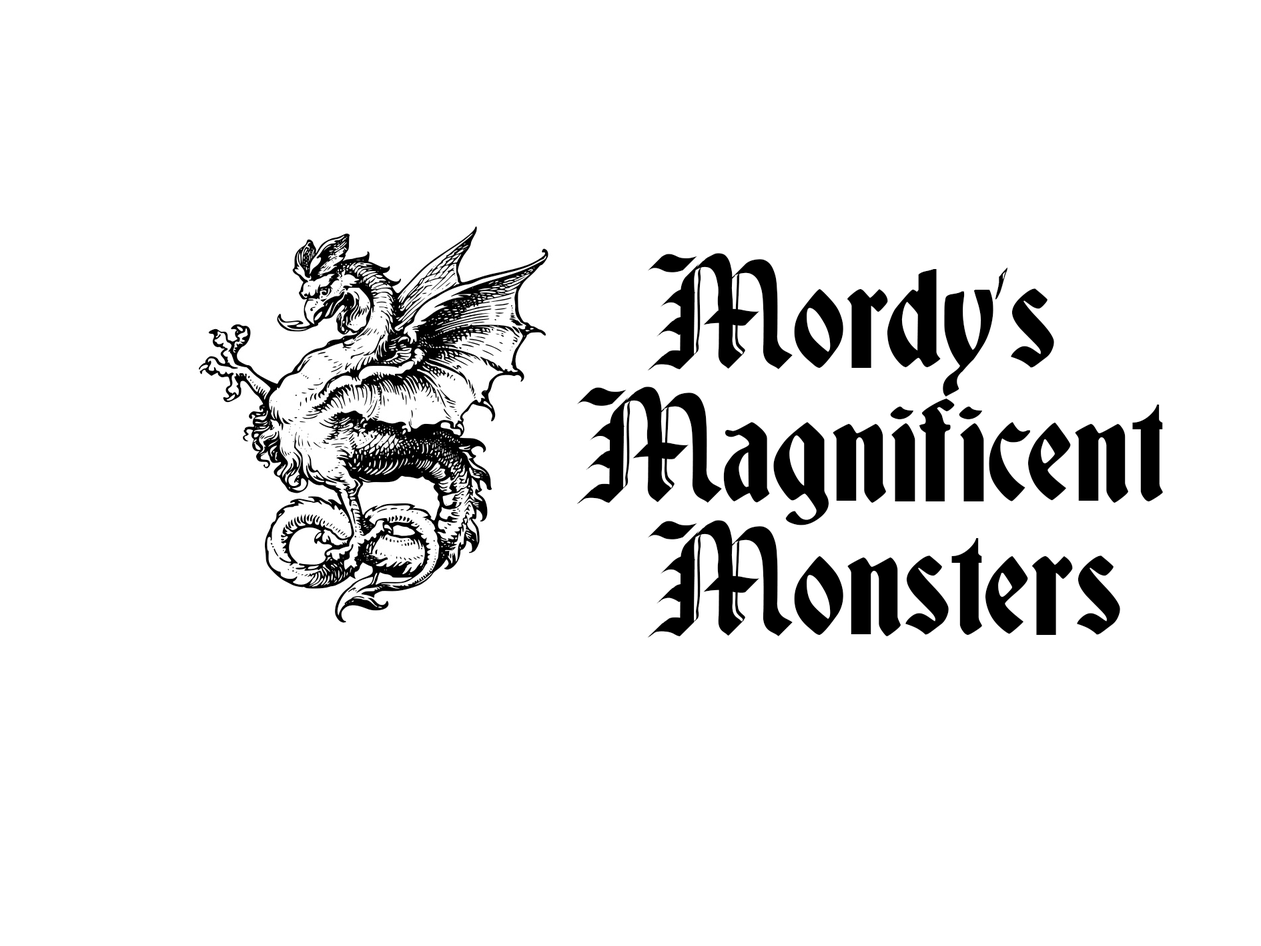
<style>
.page{position:relative;width:1261px;height:946px;background:#ffffff}
.page>*{position:absolute;margin:0}
.t1{font:133.5px/133.5px "Deutsch-Gothic";color:#000000}
.t2{font:166.8px/133.5px "Blacklet-NormalBold";color:#000000}
.t3{font:133.5px/133.5px "DeutscheZierschrift";color:#000000;scale:0.5 1}
</style>
<div class="page">
<p class="t1" style="left:577px;top:253px;width:586px;height:384px"><span class="t2">M</span>ordy<span class="t3">’</span>s<br><span class="t2">M</span>agnificent<br> <span class="t2">M</span>onsters</p>
</div>
